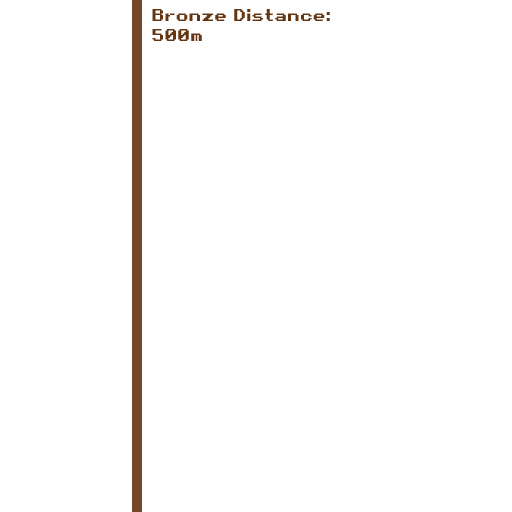
<style>
.page{position:relative;width:512px;height:512px;background:#ffffff}
.page>*{position:absolute;margin:0}
.t1{font:16.7px "RetroGaming";color:#643512}
</style>
<div class="page">
<p class="t1" style="left:152px;top:9px;width:178px;height:32px">Bronze Distance:<br>500m</p>
</div>
